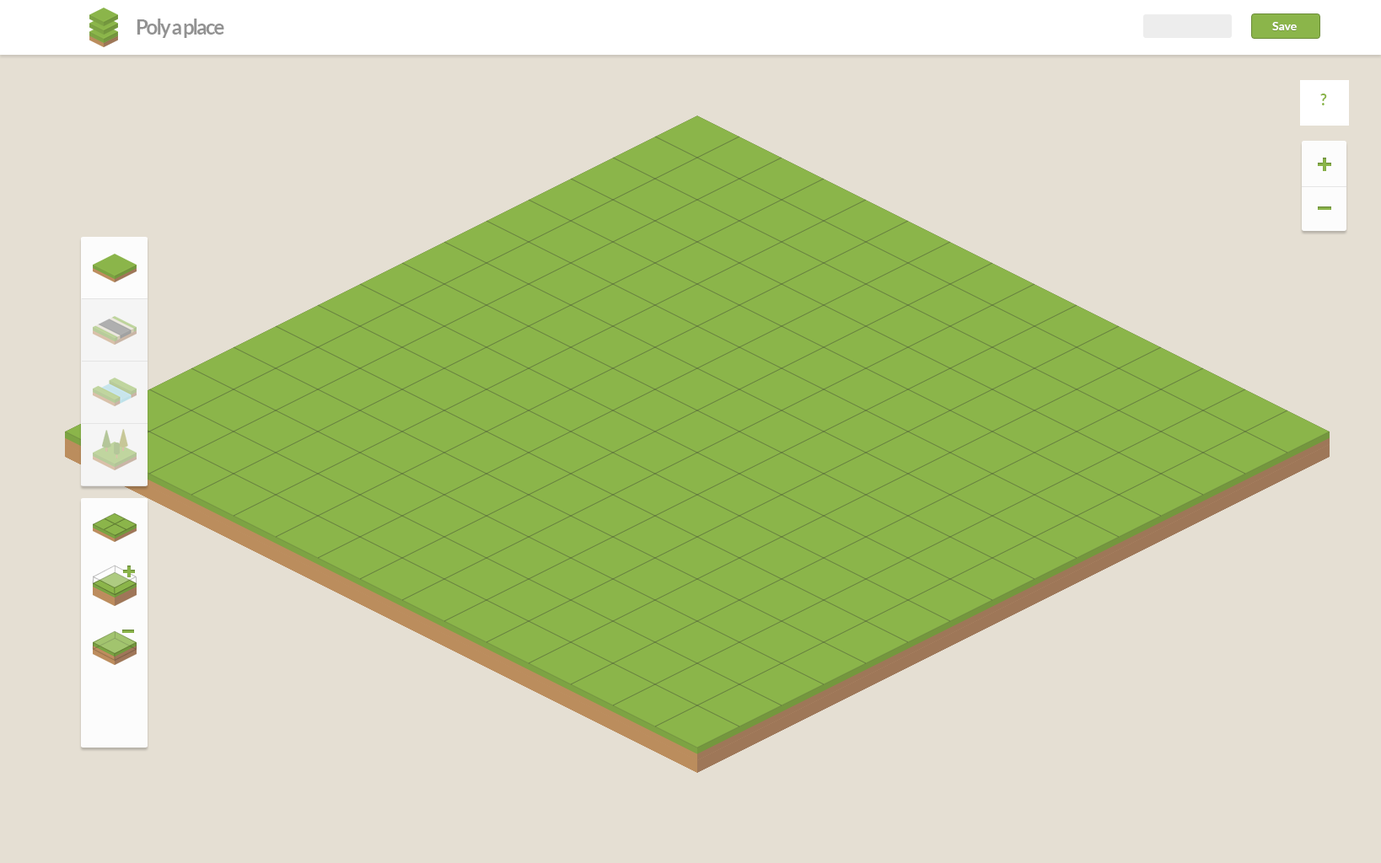
<style>
.page{position:relative;width:1381px;height:863px;background:#e5dfd3}
.page>*{position:absolute;margin:0}
.t1{font:20.2px "Lato-Bold";letter-spacing:-0.08em;color:#929292}
.t2{font:11.8px "Lato-Bold";color:#ffffff}
.t3{font:15.2px "Lato-Bold";color:#8bb54a}
</style>
<div class="page">
<p class="t1" style="left:137px;top:19px;width:87px;height:19px">Poly a place</p>
<p class="t2" style="left:1272px;top:22px;width:25px;height:8px">Save</p>
<p class="t3" style="left:1320px;top:94px;width:7px;height:11px">?</p>
</div>
